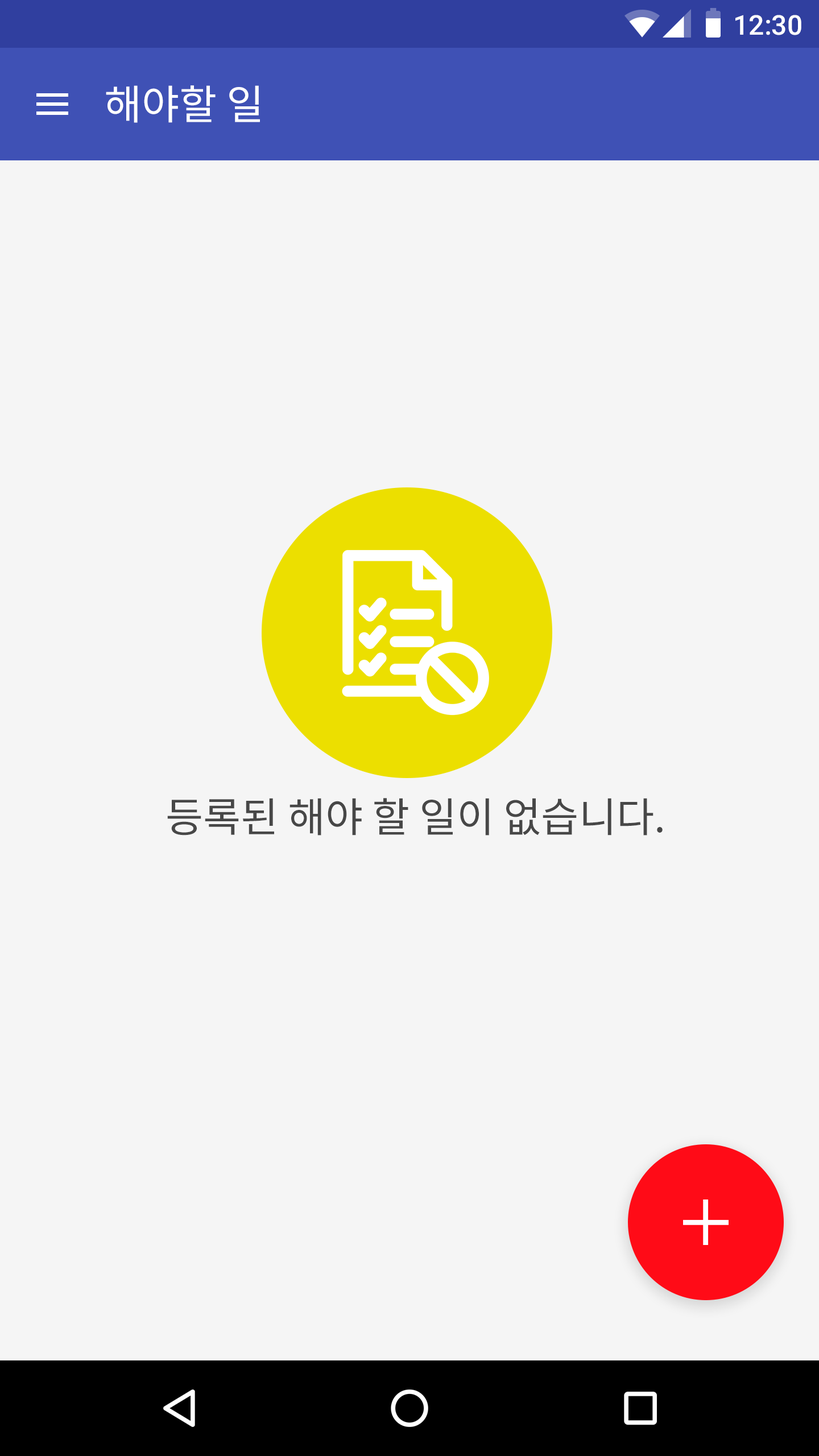
<style>
.page{position:relative;width:819px;height:1456px;background:#f5f5f5}
.page>*{position:absolute;margin:0}
.t1{font:27.3px "Roboto-Medium";color:#ffffff}
.t2{font:40.9px "NotoSansCJKkr-Regular";color:#ffffff}
.t3{font:40.9px "NotoSansCJKkr-Regular";color:#474747}
</style>
<div class="page">
<p class="t1" style="left:735px;top:15px;width:66px;height:20px">12:30</p>
<p class="t2" style="left:106px;top:85px;width:154px;height:38px">해야할 일</p>
<p class="t3" style="left:167px;top:798px;width:496px;height:37px">등록된 해야 할 일이 없습니다.</p>
</div>
